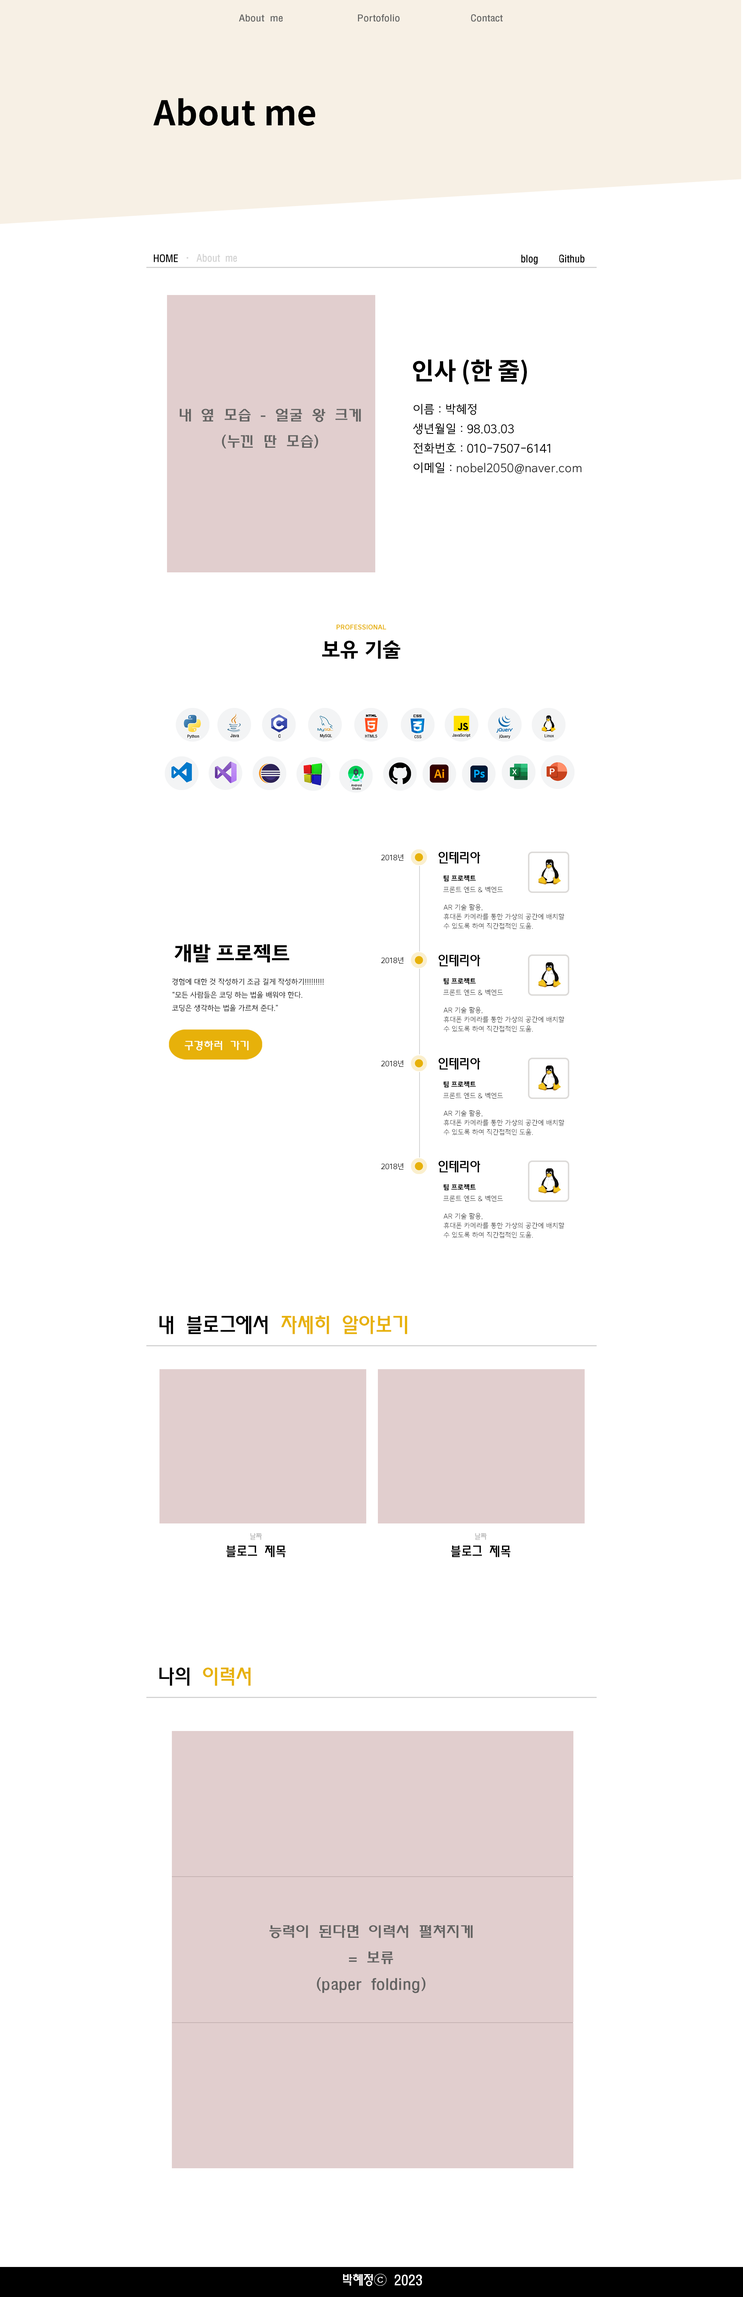
<style>
.page{position:relative;width:743px;height:2297px;background:#ffffff}
.page>*{position:absolute;margin:0}
.t1{font:8.6px "MoeumTR-HM";letter-spacing:-0.01em;color:#636362;scale:1.18 1}
.t2{font:34.2px "NotoSansKR-Bold";letter-spacing:0.005em;color:#000000}
.t3{font:9.4px "MoeumTR-HM";letter-spacing:-0.01em;color:#000000}
.t4{font:9.4px "MoeumTR-HM";letter-spacing:-0.01em;color:#d2d2d2}
.t5{font:24.4px "NotoSansKR-Bold";letter-spacing:-0.01em;color:#000000}
.t6{font:14.4px/26.3px "MoeumTR-HM";letter-spacing:-0.01em;color:#636362;scale:1.18 1}
.t7{font:12px/19.5px "KimjungchulGothic-Regular";letter-spacing:0.005em;color:#000000;text-transform:uppercase}
.t8{font:12px/19.5px "KimjungchulGothic-Regular";letter-spacing:0.005em;color:#333333}
.t9{font:9.4px "KimjungchulGothic-Bold";letter-spacing:-0.01em;color:#e7b10a;font-variant:small-caps}
.t10{font:20.6px "KimjungchulGothic-Bold";letter-spacing:-0.01em;color:#000000;text-transform:uppercase}
.t11{font:7.5px "KimjungchulGothic-Regular";letter-spacing:-0.01em;color:#000000}
.t12{font:13.1px "MoeumTR-HM";letter-spacing:-0.01em;color:#000000}
.t13{font:6.9px "KimjungchulGothic-Bold";letter-spacing:-0.01em;color:#000000;text-transform:uppercase}
.t14{font:6.9px "KimjungchulGothic-Light";letter-spacing:-0.01em;color:#000000;text-transform:uppercase}
.t15{font:6.9px/9.4px "KimjungchulGothic-Light";letter-spacing:-0.01em;color:#000000;text-transform:uppercase}
.t16{font:7.5px/13.1px "KimjungchulGothic-Regular";letter-spacing:-0.01em;color:#000000}
.t17{font:20.6px "MoeumTR-HM";letter-spacing:-0.01em;color:#e7b10a}
.t18{font:20.6px "MoeumTR-HM";letter-spacing:-0.01em;color:#000000}
.t19{font:13.1px/16.9px "MoeumTR-HM";letter-spacing:-0.01em;color:#000000}
.t20{font:7.5px/16.9px "MoeumTR-HM";letter-spacing:-0.01em;color:#bebebe}
.t21{font:13.1px "MoeumTR-HM";letter-spacing:-0.01em;color:#ffffff}
</style>
<div class="page">
<p class="t1" style="left:239px;top:14px;width:44px;height:8px">About me</p>
<p class="t1" style="left:358px;top:14px;width:42px;height:8px">Portofolio</p>
<p class="t1" style="left:471px;top:14px;width:32px;height:8px">Contact</p>
<p class="t2" style="left:153px;top:98px;width:162px;height:28px">About me</p>
<p class="t3" style="left:154px;top:254px;width:24px;height:8px">HOME</p>
<p class="t4" style="left:187px;top:254px;width:50px;height:8px">·  About me</p>
<p class="t3" style="left:521px;top:255px;width:64px;height:10px">blog    Github</p>
<p class="t5" style="left:413px;top:359px;width:114px;height:26px">인사 (한 줄)</p>
<p class="t6" style="left:180px;top:409px;width:181px;height:40px;text-align:center">내 옆 모습 - 얼굴 왕 크게<br>(누낀 딴 모습)</p>
<p class="t7" style="left:413px;top:404px;width:169px;height:70px">이름 : 박혜정<br>생년월일 : 98.03.03<br>전화번호 : 010-7507-6141<br>이메일 : <span class="t8">nobel2050@naver.com</span></p>
<p class="t9" style="left:337px;top:625px;width:49px;height:5px">professional</p>
<p class="t10" style="left:322px;top:640px;width:79px;height:19px">보유 기술</p>
<p class="t11" style="left:381px;top:854px;width:23px;height:7px">2018년</p>
<p class="t12" style="left:438px;top:852px;width:43px;height:12px">인테리아</p>
<p class="t13" style="left:444px;top:875px;width:32px;height:7px">팀 프로젝트</p>
<p class="t14" style="left:443px;top:887px;width:60px;height:6px">프론트 엔드 &amp; 벡엔드</p>
<p class="t15" style="left:444px;top:904px;width:121px;height:25px">AR 기술 활용,<br>휴대폰 카메라를 통한 가상의 공간에 배치할 <br>수 있도록 하여 직간접적인 도움.</p>
<p class="t10" style="left:175px;top:944px;width:114px;height:19px">개발 프로젝트</p>
<p class="t11" style="left:381px;top:957px;width:23px;height:7px">2018년</p>
<p class="t12" style="left:438px;top:955px;width:43px;height:12px">인테리아</p>
<p class="t16" style="left:172px;top:978px;width:152px;height:34px">경험에 대한 것 작성하기 조금 길게 작성하기!!!!!!!!!<br>“모든 사람들은 코딩 하는 법을 배워야 한다.<br>코딩은 생각하는 법을 가르쳐 준다.”</p>
<p class="t14" style="left:443px;top:990px;width:60px;height:6px">프론트 엔드 &amp; 벡엔드</p>
<p class="t13" style="left:444px;top:978px;width:32px;height:7px">팀 프로젝트</p>
<p class="t15" style="left:444px;top:1007px;width:121px;height:25px">AR 기술 활용,<br>휴대폰 카메라를 통한 가상의 공간에 배치할 <br>수 있도록 하여 직간접적인 도움.</p>
<p class="t11" style="left:381px;top:1060px;width:23px;height:7px">2018년</p>
<p class="t12" style="left:438px;top:1058px;width:43px;height:12px">인테리아</p>
<p class="t13" style="left:444px;top:1082px;width:32px;height:6px">팀 프로젝트</p>
<p class="t14" style="left:443px;top:1093px;width:60px;height:6px">프론트 엔드 &amp; 벡엔드</p>
<p class="t15" style="left:444px;top:1110px;width:121px;height:26px">AR 기술 활용,<br>휴대폰 카메라를 통한 가상의 공간에 배치할 <br>수 있도록 하여 직간접적인 도움.</p>
<p class="t11" style="left:381px;top:1163px;width:23px;height:7px">2018년</p>
<p class="t12" style="left:438px;top:1161px;width:43px;height:12px">인테리아</p>
<p class="t13" style="left:444px;top:1184px;width:32px;height:7px">팀 프로젝트</p>
<p class="t14" style="left:443px;top:1196px;width:60px;height:6px">프론트 엔드 &amp; 벡엔드</p>
<p class="t15" style="left:444px;top:1213px;width:121px;height:25px">AR 기술 활용,<br>휴대폰 카메라를 통한 가상의 공간에 배치할 <br>수 있도록 하여 직간접적인 도움.</p>
<p class="t17" style="left:160px;top:1316px;width:247px;height:19px"><span class="t18">내 블로그에서 </span>자세히 알아보기</p>
<p class="t19" style="left:226px;top:1533px;width:60px;height:24px;text-align:center"><span class="t20">날짜<br></span>블로그 제목</p>
<p class="t19" style="left:451px;top:1533px;width:60px;height:24px;text-align:center"><span class="t20">날짜<br></span>블로그 제목</p>
<p class="t17" style="left:159px;top:1668px;width:92px;height:18px"><span class="t18">나의 </span>이력서</p>
<p class="t6" style="left:270px;top:1925px;width:203px;height:69px;text-align:center">능력이 된다면 이력서 펼쳐지게<br>= 보류<br>(paper folding)</p>
<p class="t21" style="left:343px;top:2274px;width:79px;height:13px">박혜정ⓒ 2023</p>
</div>
